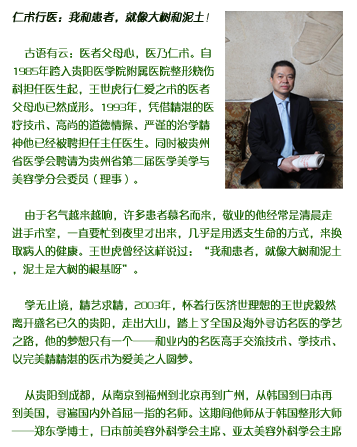
<style>
.page{position:relative;width:357px;height:447px;background:#ffffff}
.page>*{position:absolute;margin:0}
.t1{font:11px/18px "FZZQJW--GB1-0";color:#196003}
.t2{font:11px/18px "FZZQJW--GB1-0";color:#061b00;font-weight:bold;font-style:italic}
.t3{font:11px/18px "FZZQJW--GB1-0";color:#061b00;font-style:italic}
</style>
<div class="page">
<p class="t1" style="left:11px;top:11px;width:331px;height:426px"><span class="t2">仁术行医：我和患者，就像大树和泥土</span><span class="t3">！<br></span><br>    古语有云：医者父母心，医乃仁术。自<br>1985年跨入贵阳医学院附属医院整形烧伤<br>科担任医生起，王世虎行仁爱之术的医者<br>父母心已然成形。1993年，凭借精湛的医<br>疗技术、高尚的道德情操、严谨的治学精<br>神他已经被聘担任主任医生。同时被贵州<br>省医学会聘请为贵州省第二届医学美学与<br>美容学分会委员（理事）。<br><br>    由于名气越来越响，许多患者慕名而来，敬业的他经常是清晨走进手术室，一直要忙到夜里才出来，几乎是用透支生命的方式，来换取病人的健康。王世虎曾经这样说过：“我和患者，就像大树和泥土，泥土是大树的根基呀”。<br><br>    学无止境，精艺求精，2003年，怀着行医济世理想的王世虎毅然离开盛名已久的贵阳，走出大山，踏上了全国及海外寻访名医的学艺之路，他的梦想只有一个——和业内的名医高手交流技术、学技术、以完美精精湛的医术为爱美之人圆梦。<br><br>    从贵阳到成都，从南京到福州到北京再到广州，从韩国到日本再到美国，寻遍国内外首屈一指的名师。这期间他师从于韩国整形大师——郑东学博士，日本前美容外科学会主席、亚太美容外科学会主席</p>
</div>
